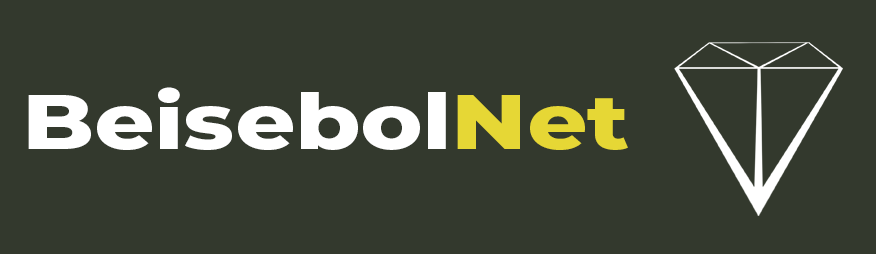
<style>
.page{position:relative;width:876px;height:254px;background:#33392d}
.page>*{position:absolute;margin:0}
.t1{font:76.8px "Montserrat-ExtraBold";color:#ffffff;scale:1.22 1}
.t2{font:76.8px "Montserrat-ExtraBold";color:#e6d735;scale:1.22 1}
</style>
<div class="page">
<p class="t1" style="left:28px;top:87px;width:600px;height:63px">Beisebol<span class="t2">Net</span></p>
</div>
